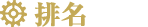
<style>
.page{position:relative;width:148px;height:27px;background:#ffffff}
.page>*{position:absolute;margin:0}
.t1{font:26px "RyuminPr6N-ExBold";color:#c4aa57;font-weight:bold}
</style>
<div class="page">
<p class="t1" style="left:34px;top:1px;width:52px;height:26px">排名</p>
</div>
